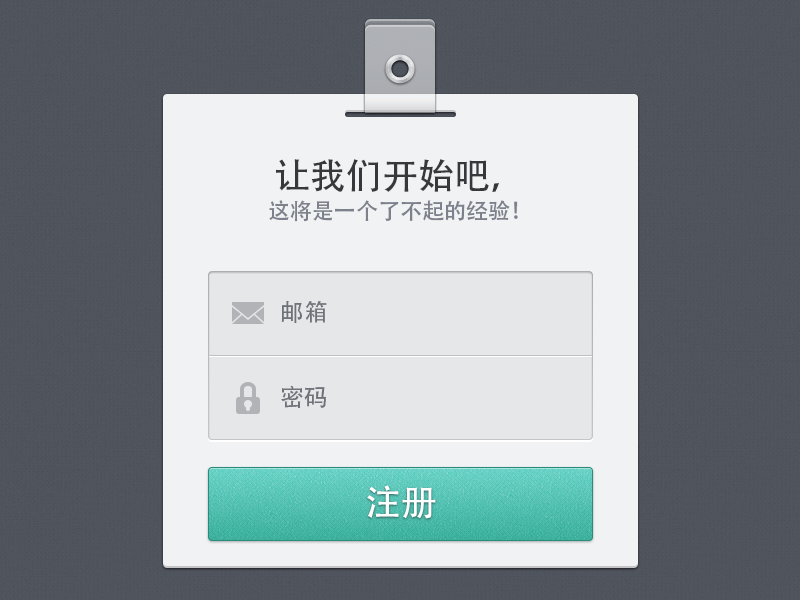
<style>
.page{position:relative;width:800px;height:600px;background:#f1f2f4}
.page>*{position:absolute;margin:0}
.t1{font:22px/30px "AdobeHeitiStd-Regular";color:#7c818b}
.t2{font:36px/30px "AdobeHeitiStd-Regular";color:#36383c}
.t3{font:24px "AdobeHeitiStd-Regular";color:#6f7278}
.t4{font:36px "AdobeHeitiStd-Regular";color:#ffffff}
</style>
<div class="page">
<p class="t1" style="left:269px;top:159px;width:249px;height:63px;text-align:center"><span class="t2">让我们开始吧，<br></span>这将是一个了不起的经验！</p>
<p class="t3" style="left:281px;top:300px;width:46px;height:23px">邮箱</p>
<p class="t3" style="left:281px;top:386px;width:45px;height:22px">密码</p>
<p class="t4" style="left:367px;top:485px;width:69px;height:34px">注册</p>
</div>
